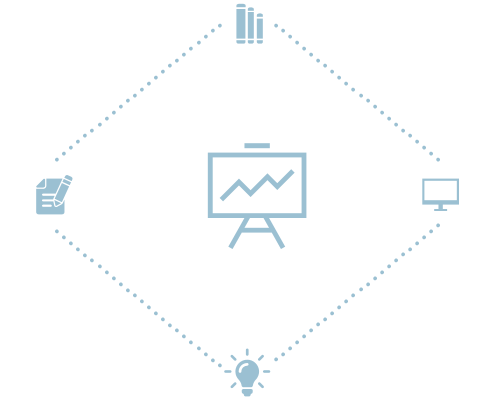
<style>
.page{position:relative;width:500px;height:400px;background:#ffffff}
.page>*{position:absolute;margin:0}
.t1{font:48px "NexaLight";color:#9bc0d2}
</style>
<div class="page">
<p class="t1" style="left:55px;top:23px;width:167px;height:139px;rotate:-40deg">........................</p>
<p class="t1" style="left:274px;top:23px;width:166px;height:139px;rotate:-140deg">........................</p>
<p class="t1" style="left:55px;top:229px;width:167px;height:139px;rotate:40deg">........................</p>
<p class="t1" style="left:274px;top:223px;width:166px;height:139px;rotate:140deg">........................</p>
</div>
